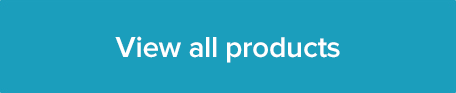
<style>
.page{position:relative;width:456px;height:93px;background:#1b9ebc}
.page>*{position:absolute;margin:0}
.t1{font:30px "ProximaNova-Semibold";letter-spacing:-0.012em;color:#ffffff}
</style>
<div class="page">
<p class="t1" style="left:115px;top:36px;width:225px;height:27px">View all products</p>
</div>
